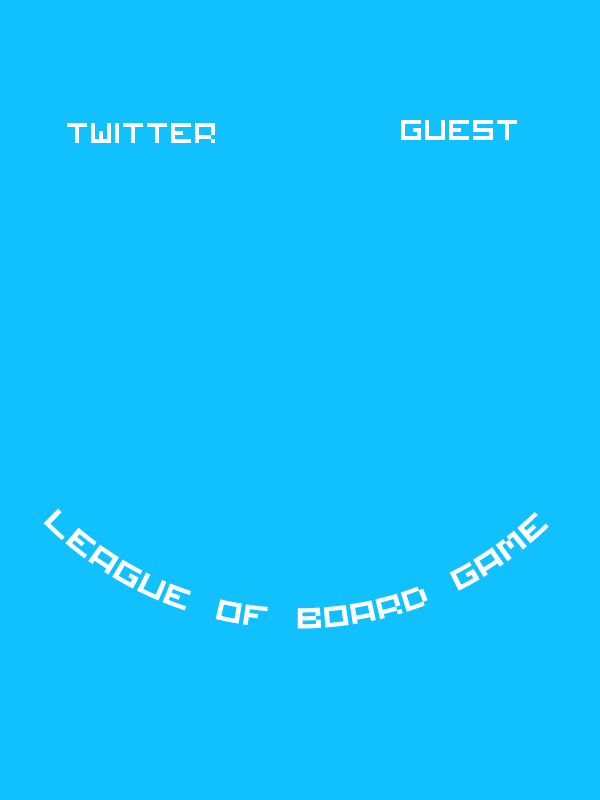
<style>
.page{position:relative;width:600px;height:800px;background:#11c1ff}
.page>*{position:absolute;margin:0}
.t1{font:40px "Matchworks";color:#ffffff}
.t2{font:40px/30px "Matchworks";color:#ffffff}
</style>
<div class="page">
<p class="t1" style="left:67px;top:123px;width:148px;height:20px">twitter</p>
<p class="t1" style="left:401px;top:120px;width:116px;height:20px">guest</p>
<p class="t2" style="left:43px;top:509px;width:506px;height:120px">League of Board Game</p>
</div>
